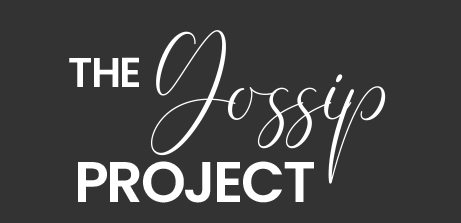
<style>
.page{position:relative;width:461px;height:223px;background:#333333}
.page>*{position:absolute;margin:0}
.t1{font:141px "ElegantDEMO";letter-spacing:-0.04em;color:#ffffff;scale:0.95 1}
.t2{font:41.7px "Poppins-SemiBold";letter-spacing:-0.04em;color:#ffffff}
.t3{font:57.2px "Poppins-SemiBold";letter-spacing:-0.04em;color:#ffffff}
</style>
<div class="page">
<p class="t1" style="left:151px;top:30px;width:235px;height:154px">Gossip</p>
<p class="t2" style="left:69px;top:57px;width:70px;height:30px">THE</p>
<p class="t3" style="left:78px;top:161px;width:236px;height:42px">PROJECT</p>
</div>
